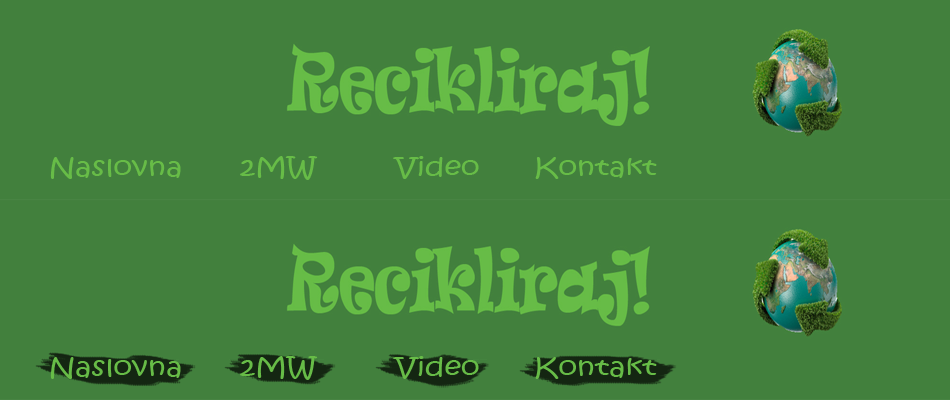
<style>
.page{position:relative;width:950px;height:400px;background:#42803d}
.page>*{position:absolute;margin:0}
.t1{font:24px "KristenITC-Regular";color:#67bc47;scale:1.25 1}
</style>
<div class="page">
<p class="t1" style="left:50px;top:157px;width:131px;height:22px">Naslovna</p>
<p class="t1" style="left:240px;top:156px;width:78px;height:24px">2MW</p>
<p class="t1" style="left:393px;top:156px;width:86px;height:23px">Video</p>
<p class="t1" style="left:535px;top:157px;width:122px;height:22px">Kontakt</p>
<p class="t1" style="left:50px;top:357px;width:131px;height:22px">Naslovna</p>
<p class="t1" style="left:240px;top:356px;width:78px;height:24px">2MW</p>
<p class="t1" style="left:393px;top:356px;width:86px;height:23px">Video</p>
<p class="t1" style="left:535px;top:357px;width:122px;height:22px">Kontakt</p>
</div>
